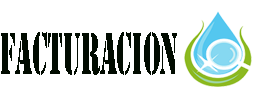
<style>
.page{position:relative;width:273px;height:100px;background:#ffffff}
.page>*{position:absolute;margin:0}
.t1{font:61.8px "Stencil";color:#010b00;scale:0.43 1}
</style>
<div class="page">
<p class="t1" style="left:1px;top:32px;width:176px;height:43px">FACTURACION</p>
</div>
